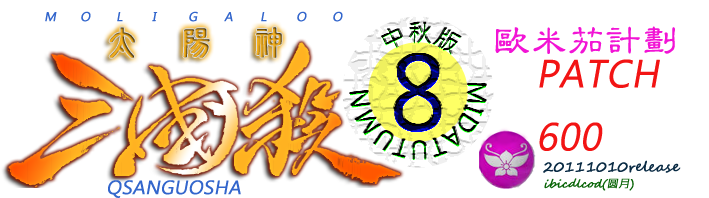
<style>
.page{position:relative;width:709px;height:198px;background:#ffffff}
.page>*{position:absolute;margin:0}
.t1{font:12px "MicrosoftJhengHeiRegular";color:#3366cc;font-weight:bold;font-style:italic}
.t2{font:36px "FZLBFW--GB1-0";color:#f214d5;font-weight:bold}
.t3{font:36px "MicrosoftJhengHeiRegular";color:#f21414;font-weight:bold;font-style:italic}
.t4{font:14px "SegoeScript";color:#0a2b44;font-weight:bold}
.t5{font:18px "MicrosoftJhengHeiRegular";color:#3366cc;font-weight:bold;font-style:italic}
.t6{font:11px "SegoeScript";color:#0a6508;font-weight:bold;font-style:italic}
.t7{font:11px "MicrosoftJhengHeiRegular";color:#0a6508;font-weight:bold;font-style:italic}
</style>
<div class="page">
<p class="t1" style="left:45px;top:11px;width:298px;height:11px">M O L I G A L O O</p>
<p class="t2" style="left:495px;top:26px;width:180px;height:28px">欧米茄计划</p>
<p class="t3" style="left:539px;top:59px;width:121px;height:92px">PATCH<br>600</p>
<p class="t4" style="left:543px;top:160px;width:138px;height:13px">20111010release</p>
<p class="t5" style="left:108px;top:180px;width:133px;height:18px">QSANGUOSHA</p>
<p class="t6" style="left:544px;top:178px;width:90px;height:13px">ibicdlcod(<span class="t7">圆月</span>)</p>
</div>
